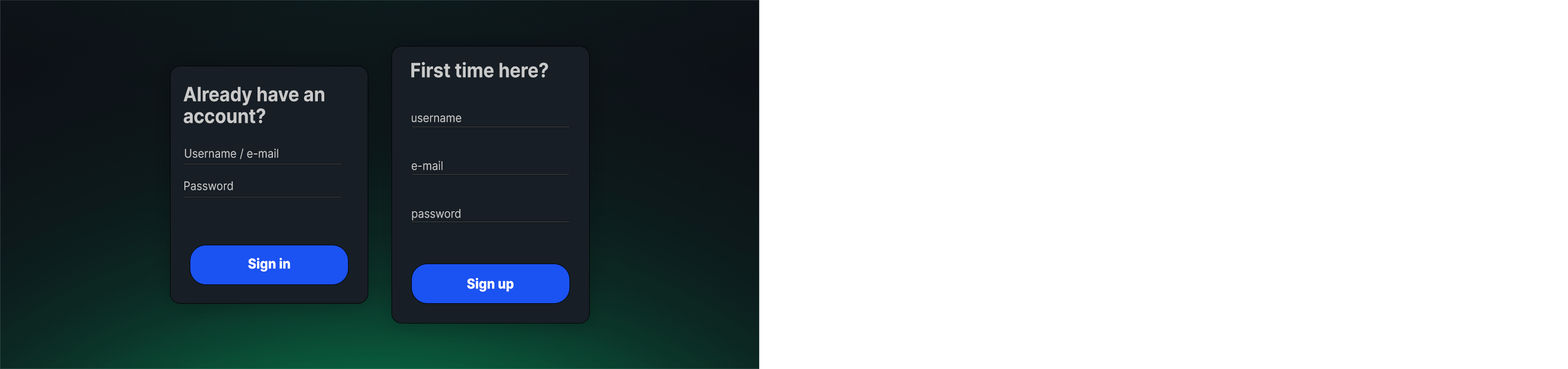
<style>
.page{position:relative;width:1568px;height:369px;background:#ffffff}
.page>*{position:absolute;margin:0}
.t1{font:19.8px "Inter-Bold";color:#c9c9c9;scale:0.92 1}
.t2{font:19.8px/21.8px "Inter-Bold";color:#c9c9c9;scale:0.92 1}
.t3{font:11.9px "Inter-Regular";color:#c9c9c9;scale:0.92 1}
.t4{font:13.8px "Inter-ExtraBold";color:#ffffff;scale:0.92 1}
</style>
<div class="page">
<p class="t1" style="left:411px;top:62px;width:137px;height:16px">First time here?</p>
<p class="t2" style="left:183px;top:87px;width:141px;height:37px">Already have an <br>account?</p>
<p class="t3" style="left:412px;top:115px;width:49px;height:7px">username</p>
<p class="t3" style="left:185px;top:148px;width:93px;height:11px">Username / e-mail</p>
<p class="t3" style="left:411px;top:161px;width:31px;height:9px">e-mail</p>
<p class="t3" style="left:184px;top:181px;width:49px;height:9px">Password</p>
<p class="t3" style="left:412px;top:209px;width:49px;height:11px">password</p>
<p class="t4" style="left:248px;top:258px;width:42px;height:13px">Sign in</p>
<p class="t4" style="left:467px;top:277px;width:47px;height:15px">Sign up</p>
</div>
